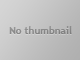
<style>
.page{position:relative;width:80px;height:60px}
.page>*{position:absolute;margin:0}
.t1{font:10px "TrebuchetMS-Bold";color:#898989}
</style>
<div class="page">
<p class="t1" style="left:9px;top:26px;width:63px;height:8px">No thumbnail</p>
</div>
